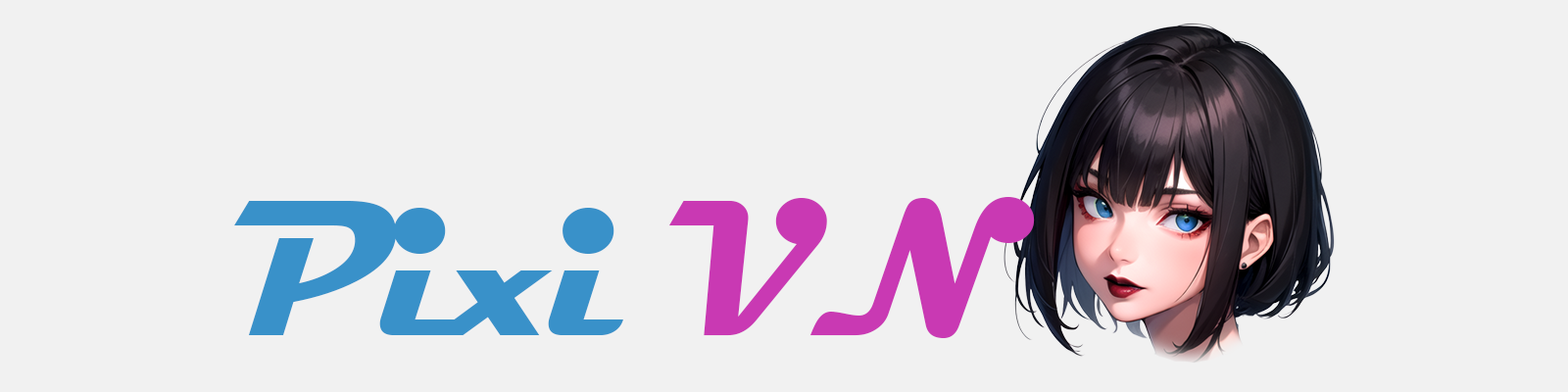
<style>
.page{position:relative;width:1568px;height:392px;background:#f1f1f1}
.page>*{position:absolute;margin:0}
.t1{font:196px "Magneto-Bold";color:#3991c9}
.t2{font:196px "Magneto-Bold";color:#c939b3}
</style>
<div class="page">
<p class="t1" style="left:234px;top:197px;width:801px;height:141px">Pixi <span class="t2">VN</span></p>
</div>
